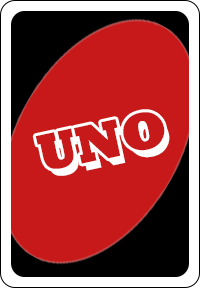
<style>
.page{position:relative;width:200px;height:288px;background:#c71919}
.page>*{position:absolute;margin:0}
.t1{font:53.5px "Rockwell-ExtraBold";color:#c71919}
.t2{font:53.5px "Rockwell-ExtraBold";color:#ffffff}
</style>
<div class="page">
<p class="t1" style="left:35px;top:112px;width:130px;height:57px;rotate:-12deg">UNO</p>
<p class="t2" style="left:40px;top:119px;width:130px;height:57px;rotate:-12deg">UNO</p>
</div>
